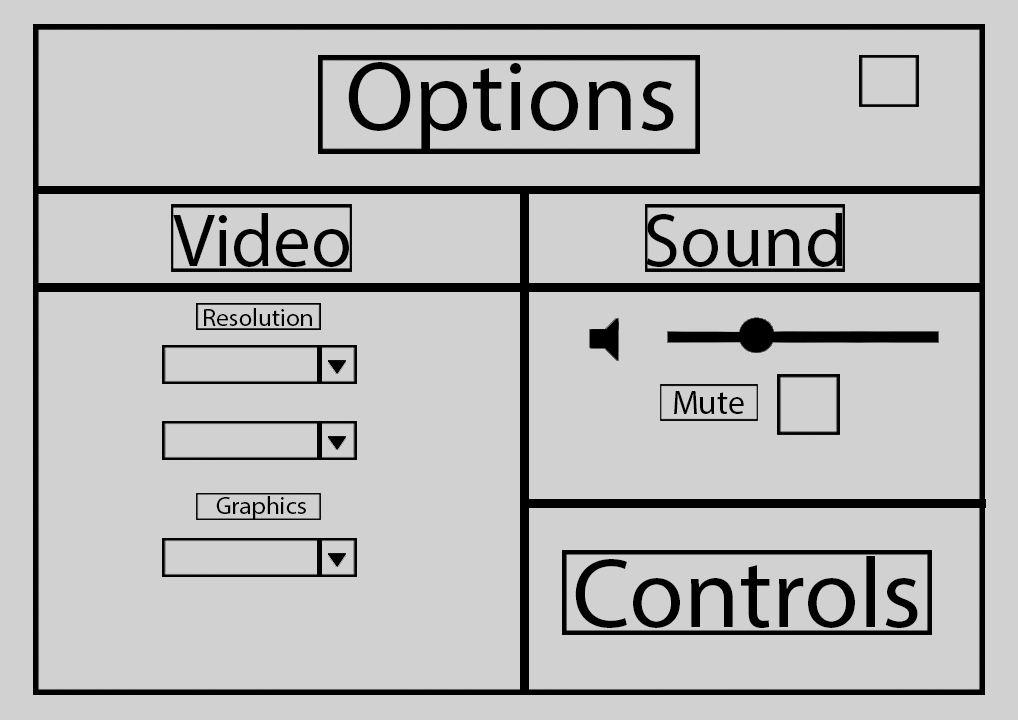
<style>
.page{position:relative;width:1018px;height:720px;background:#d1d1d1}
.page>*{position:absolute;margin:0}
.t1{font:100px "MyriadPro-Regular";color:#000000}
.t2{font:75px "MyriadPro-Regular";color:#000000}
.t3{font:25px "MyriadPro-Regular";color:#000000}
.t4{font:33.3px "MyriadPro-Regular";color:#000000}
</style>
<div class="page">
<p class="t1" style="left:348px;top:62px;width:326px;height:88px">Options</p>
<p class="t2" style="left:173px;top:213px;width:176px;height:54px">Video</p>
<p class="t2" style="left:646px;top:213px;width:197px;height:54px">Sound</p>
<p class="t3" style="left:204px;top:308px;width:108px;height:18px">Resolution</p>
<p class="t4" style="left:674px;top:391px;width:70px;height:23px">Mute</p>
<p class="t3" style="left:216px;top:496px;width:90px;height:23px">Graphics</p>
<p class="t1" style="left:575px;top:556px;width:343px;height:72px">Controls</p>
</div>
